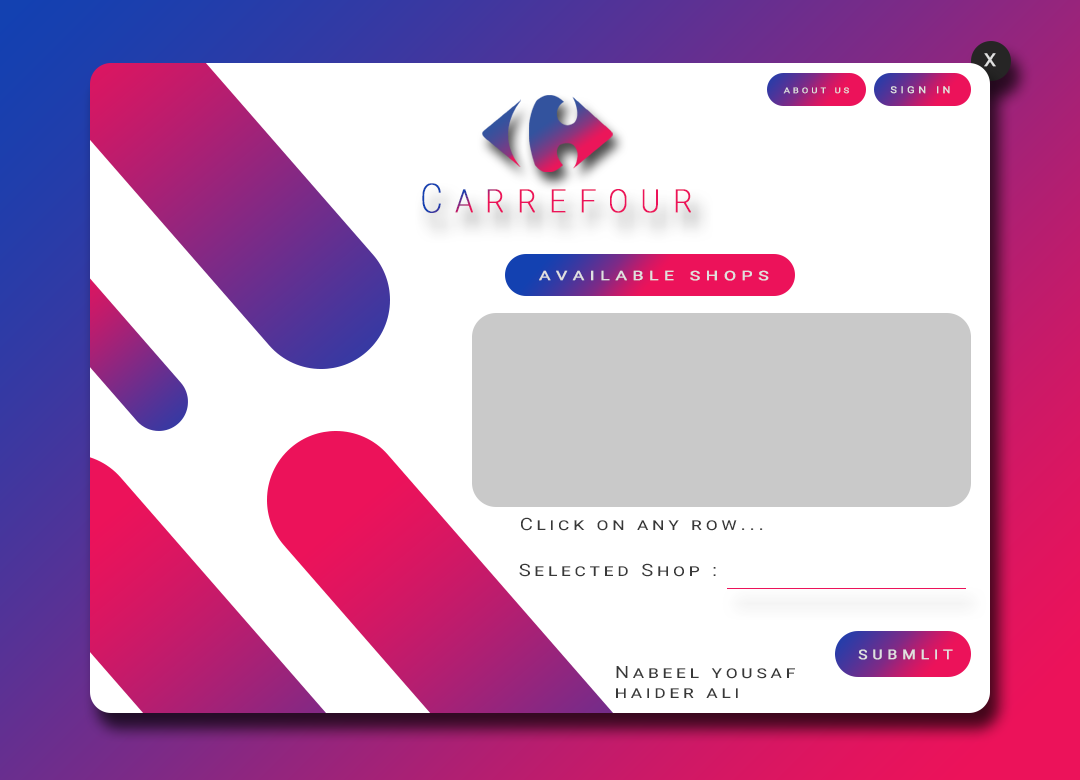
<style>
.page{position:relative;width:1080px;height:780px;background:#ffffff}
.page>*{position:absolute;margin:0}
.t1{font:18px "Roboto-Regular";letter-spacing:0.3em;color:#e0e0e0;font-weight:bold;scale:1.05 1}
.t2{font:7.9px "Roboto-Regular";letter-spacing:0.3em;color:#e0e0e0;text-transform:uppercase;font-weight:bold;scale:1.19 1}
.t3{font:9.4px "Roboto-Regular";letter-spacing:0.3em;color:#e0e0e0;text-transform:uppercase;font-weight:bold;scale:1.17 1}
.t4{font:40px "Roboto-Thin";letter-spacing:0.35em;color:#ec125a;font-variant:small-caps;font-weight:bold;scale:0.85 1}
.t5{font:13px "Roboto-Regular";letter-spacing:0.3em;color:#e0e0e0;text-transform:uppercase;font-weight:bold;scale:1.34 1}
.t6{font:16.9px "Roboto-Regular";letter-spacing:0.18em;color:#383838;font-variant:small-caps;scale:1.2 1}
.t7{font:13.2px "Roboto-Regular";letter-spacing:0.3em;color:#e0e0e0;text-transform:uppercase;font-weight:bold;scale:1.17 1}
</style>
<div class="page">
<p class="t1" style="left:984px;top:53px;width:12px;height:14px">X</p>
<p class="t2" style="left:783px;top:87px;width:66px;height:7px">About Us</p>
<p class="t3" style="left:890px;top:86px;width:60px;height:8px">Sign in</p>
<p class="t4" style="left:422px;top:183px;width:269px;height:30px">Carrefour</p>
<p class="t5" style="left:539px;top:270px;width:230px;height:11px">Available Shops</p>
<p class="t6" style="left:521px;top:517px;width:242px;height:14px">Click on any row...</p>
<p class="t6" style="left:519px;top:563px;width:197px;height:14px">Selected Shop :</p>
<p class="t7" style="left:858px;top:649px;width:95px;height:11px">Submlit</p>
<p class="t6" style="left:616px;top:666px;width:179px;height:32px">Nabeel yousaf<br>haider ali</p>
</div>
